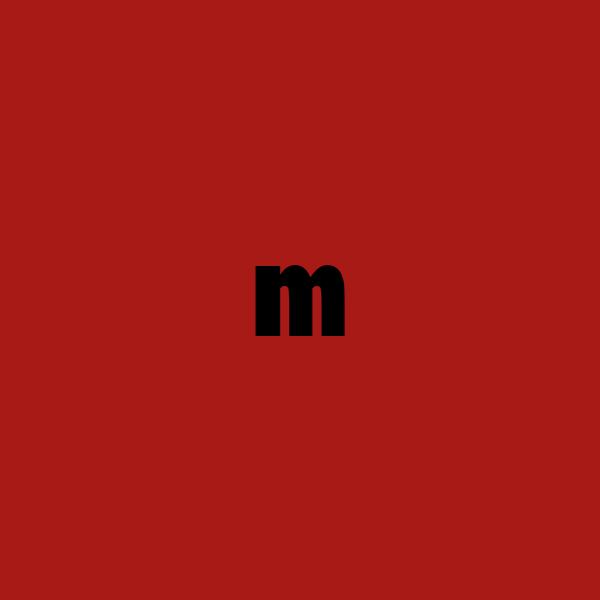
<style>
.page{position:relative;width:600px;height:600px;background:#a81a15}
.page>*{position:absolute;margin:0}
.t1{font:120px "GillSans-UltraBoldCondensed";color:#000000}
</style>
<div class="page">
<p class="t1" style="left:255px;top:265px;width:90px;height:71px">m</p>
</div>
